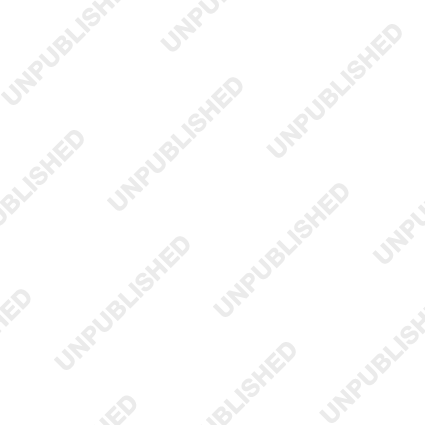
<style>
.page{position:relative;width:425px;height:425px;background:#ffffff}
.page>*{position:absolute;margin:0}
.t1{font:24px "HelveticaNeue-Bold";color:#ebebeb;font-weight:bold}
</style>
<div class="page">
<p class="t1" style="left:266px;top:24px;width:136px;height:134px;rotate:-45deg">UNPUBLISHED</p>
<p class="t1" style="left:107px;top:77px;width:136px;height:134px;rotate:-45deg">UNPUBLISHED</p>
<p class="t1" style="left:213px;top:183px;width:136px;height:134px;rotate:-45deg">UNPUBLISHED</p>
<p class="t1" style="left:54px;top:236px;width:136px;height:134px;rotate:-45deg">UNPUBLISHED</p>
</div>
